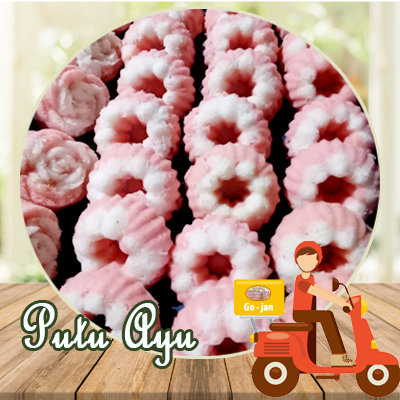
<style>
.page{position:relative;width:400px;height:400px}
.page>*{position:absolute;margin:0}
.t1{font:64.2px "FrenchScriptMT";color:#faffff;font-weight:bold;scale:0.87 1}
.t2{font:10.3px "ErasITC-Bold";color:#faffff;font-weight:bold;scale:0.72 1}
</style>
<div class="page">
<p class="t1" style="left:23px;top:303px;width:173px;height:63px">Putu Ayu</p>
<p class="t2" style="left:243px;top:303px;width:30px;height:10px">Go - jan</p>
</div>
